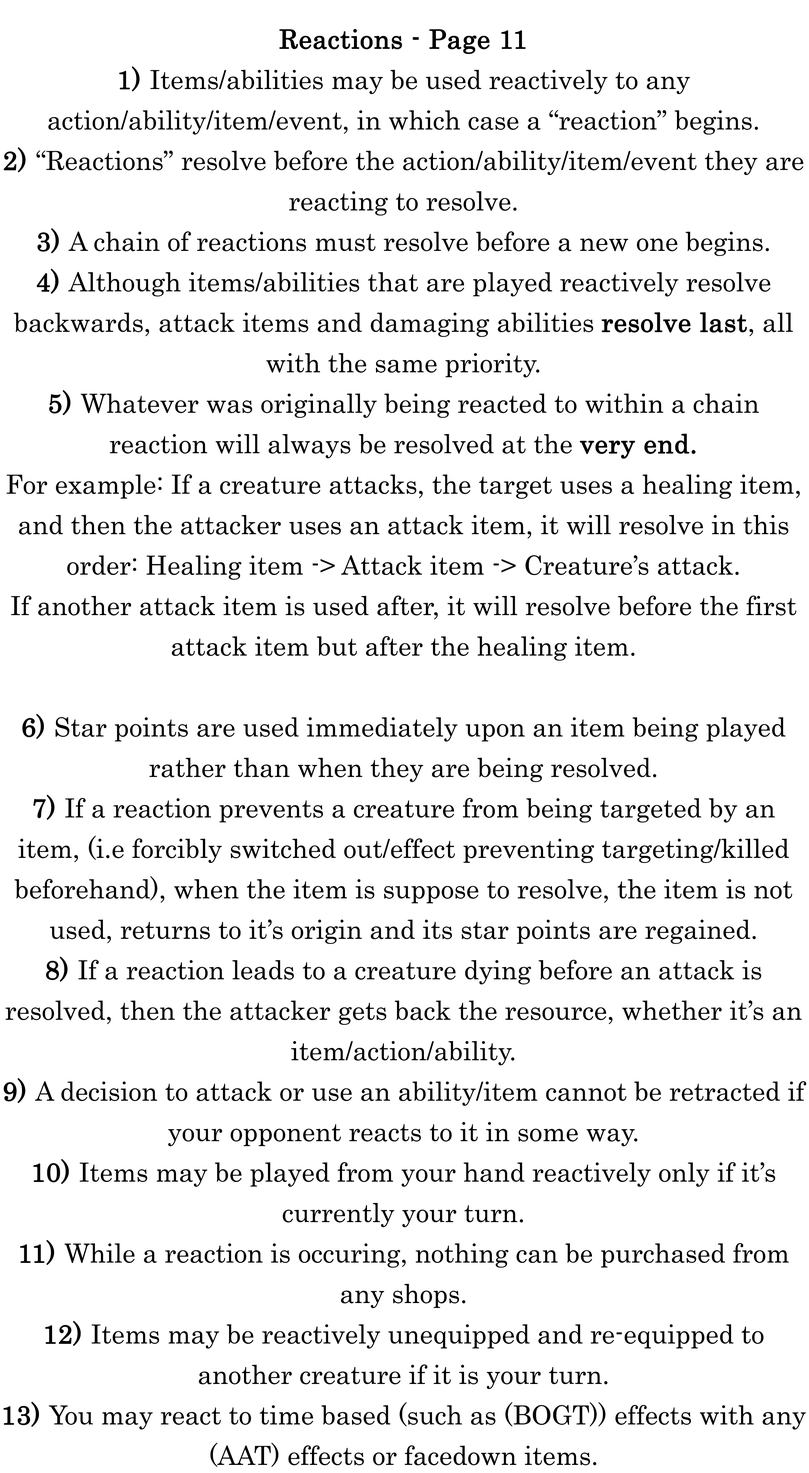
<style>
.page{position:relative;width:809px;height:1473px;background:#ffffff}
.page>*{position:absolute;margin:0}
.t1{font:45px/40.5px "Century";color:#000000}
.t2{font:45px/40.5px "Century";color:#000000;font-weight:bold}
</style>
<div class="page">
<p class="t1" style="left:4px;top:29px;width:803px;height:1438px;text-align:center"><span class="t2">Reactions - Page 11<br>1) </span>Items/abilities may be used reactively to any action/ability/item/event, in which case a “reaction” begins.<br><span class="t2">2) </span>“Reactions” resolve before the action/ability/item/event they are reacting to resolve.<br><span class="t2">3) </span>A chain of reactions must resolve before a new one begins.<br><span class="t2">4) </span>Although items/abilities that are played reactively resolve backwards, attack items and damaging abilities <span class="t2">resolve last</span>, all with the same priority.<br><span class="t2">5) </span>Whatever was originally being reacted to within a chain reaction will always be resolved at the <span class="t2">very end.<br></span>For example: If a creature attacks, the target uses a healing item, and then the attacker uses an attack item, it will resolve in this order: Healing item -&gt; Attack item -&gt; Creature’s attack.<br>If another attack item is used after, it will resolve before the first attack item but after the healing item.<br><br><span class="t2">6) </span>Star points are used immediately upon an item being played rather than when they are being resolved.<br><span class="t2">7) </span>If a reaction prevents a creature from being targeted by an item, (i.e forcibly switched out/effect preventing targeting/killed beforehand), when the item is suppose to resolve, the item is not used, returns to it’s origin and its star points are regained.<br><span class="t2">8) </span>If a reaction leads to a creature dying before an attack is resolved, then the attacker gets back the resource, whether it’s an item/action/ability.<br><span class="t2">9) </span>A decision to attack or use an ability/item cannot be retracted if your opponent reacts to it in some way.<br><span class="t2">10) </span>Items may be played from your hand reactively only if it’s currently your turn.<br><span class="t2">11) </span>While a reaction is occuring, nothing can be purchased from any shops.<br><span class="t2">12) </span>Items may be reactively unequipped and re-equipped to another creature if it is your turn.<br><span class="t2">13) </span>You may react to time based (such as (BOGT)) effects with any (AAT) effects or facedown items.</p>
</div>
